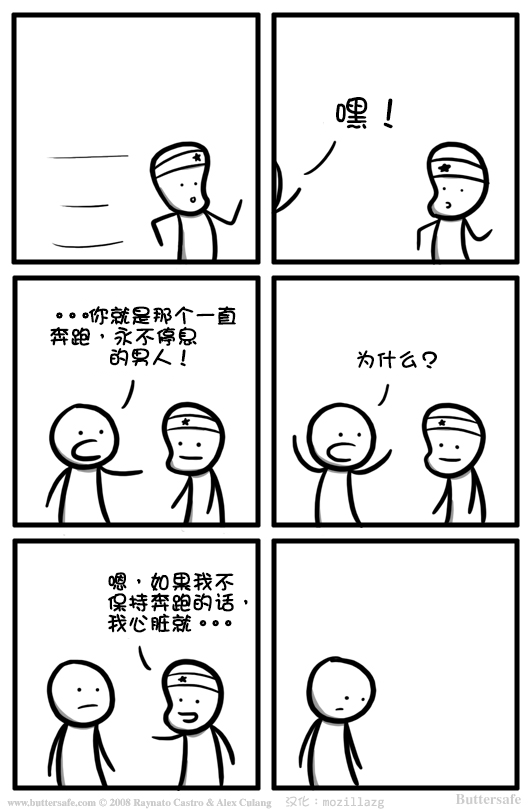
<style>
.page{position:relative;width:532px;height:810px;background:#ffffff}
.page>*{position:absolute;margin:0}
.t1{font:37.5px "DFGirl";color:#000000}
.t2{font:20.8px/20.8px "DFGirl";color:#000000;font-weight:bold}
.t3{font:20.8px/20.8px "DFGirl";letter-spacing:-0.4em;color:#000000;font-weight:bold}
.t4{font:20.8px "DFGirl";color:#000000;font-weight:bold}
.t5{font:20.8px/20.8px "DFGirl";letter-spacing:-0.42em;color:#000000;font-weight:bold}
.t6{font:12.5px "YaHei-Consolas-Hybrid";color:#cccccc}
.t7{font:12.5px "DFGirl";color:#cccccc}
</style>
<div class="page">
<p class="t1" style="left:336px;top:97px;width:57px;height:32px">嘿！</p>
<p class="t2" style="left:50px;top:306px;width:186px;height:61px"><span class="t3">。。。</span>你就是那个一直<br>奔跑，永不停息<br>        的男人！</p>
<p class="t4" style="left:357px;top:350px;width:80px;height:19px">为什么？</p>
<p class="t2" style="left:107px;top:572px;width:141px;height:61px">嗯，如果我不<br>保持奔跑的话，<br>我心脏就<span class="t5">。。。</span></p>
<p class="t6" style="left:285px;top:795px;width:99px;height:14px"><span class="t7">汉化：</span>mozillazg</p>
</div>
